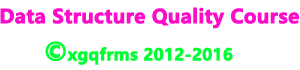
<style>
.page{position:relative;width:300px;height:70px;background:#ffffff}
.page>*{position:absolute;margin:0}
.t1{font:19px "MicrosoftYaHei-Bold";color:#fb0ccb;font-weight:bold}
.t2{font:16px "MicrosoftYaHei-Bold";color:#00ff33;font-weight:bold}
.t3{font:24px "MicrosoftYaHei-Bold";color:#00ff33;font-weight:bold}
</style>
<div class="page">
<p class="t1" style="left:0px;top:7px;width:299px;height:22px">Data Structure Quality Course</p>
<p class="t2" style="left:45px;top:41px;width:188px;height:24px"><span class="t3">©</span>xgqfrms 2012-2016</p>
</div>
